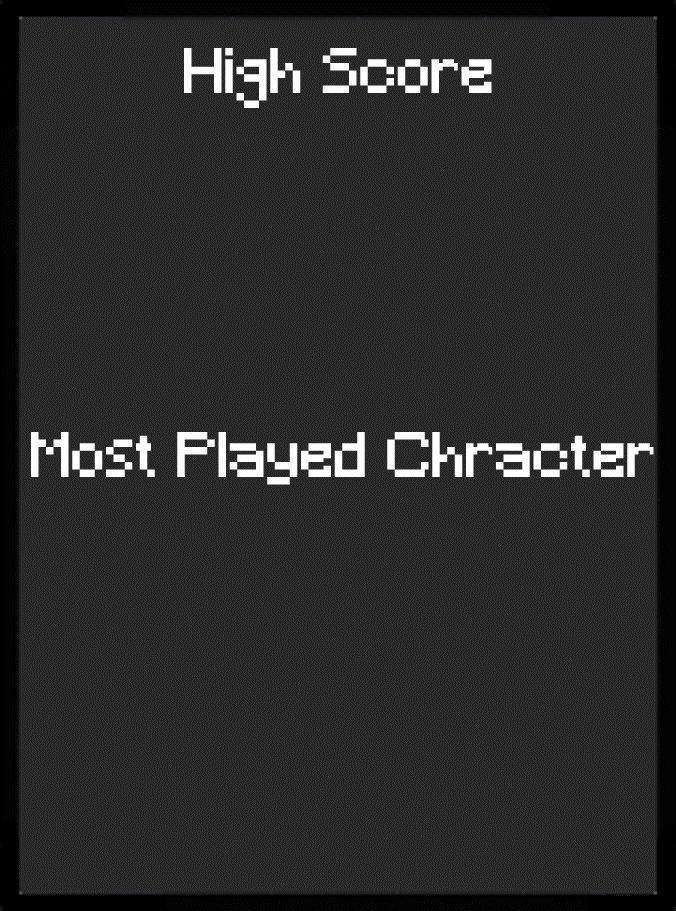
<style>
.page{position:relative;width:676px;height:911px;background:#222222}
.page>*{position:absolute;margin:0}
.t1{font:60px "Minecraft";color:#ffffff}
</style>
<div class="page">
<p class="t1" style="left:184px;top:48px;width:308px;height:60px">High Score</p>
<p class="t1" style="left:31px;top:432px;width:623px;height:53px">Most Played Chracter</p>
</div>
